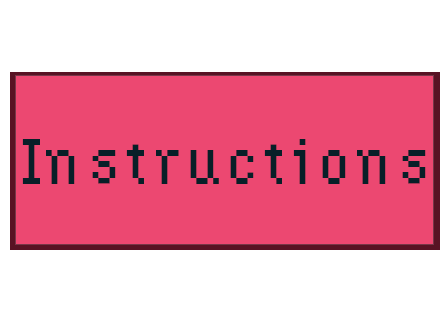
<style>
.page{position:relative;width:448px;height:320px;background:#ec4871}
.page>*{position:absolute;margin:0}
.t1{font:62.2px "HydrophiliaIced";letter-spacing:0.1em;color:#081f28}
</style>
<div class="page">
<p class="t1" style="left:22px;top:139px;width:404px;height:45px">Instructions</p>
</div>
